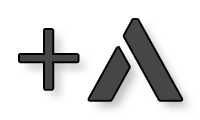
<style>
.page{position:relative;width:200px;height:120px;background:#ffffff}
.page>*{position:absolute;margin:0}
.t1{font:120px "MinionPro-Regular";color:#464646}
.t2{font:40px "Arial-Black";color:#0078a5}
.t3{font:120px "AquireBold";color:#464646}
</style>
<div class="page">
<p class="t1" style="left:20px;top:30px;width:58px;height:59px"><span class="t2"> <br></span>+</p>
<p class="t3" style="left:89px;top:20px;width:93px;height:80px"><span class="t2"> <br></span>A</p>
</div>
